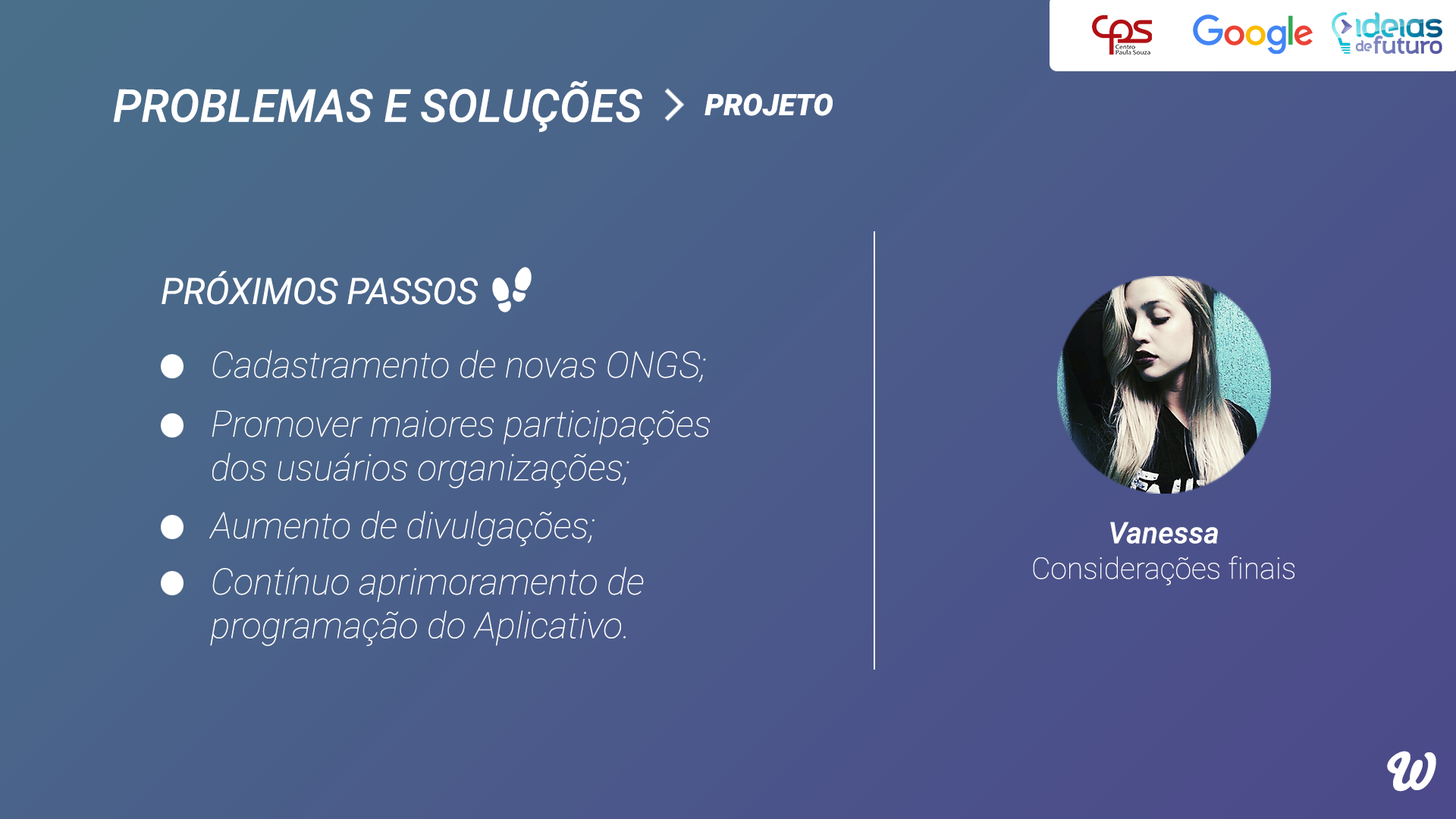
<style>
.page{position:relative;width:1456px;height:819px}
.page>*{position:absolute;margin:0}
.t1{font:45.5px "Roboto-MediumItalic";color:#ffffff}
.t2{font:29.7px "Roboto-BlackItalic";color:#ffffff}
.t3{font:36.4px "Roboto-Italic";color:#ffffff}
.t4{font:36.4px "Roboto-ThinItalic";color:#ffffff}
.t5{font:29.6px "Roboto-Thin";color:#ffffff}
.t6{font:29.6px "Roboto-MediumItalic";color:#ffffff}
.t7{font:50.8px "Bello-Pro";color:#ffffff}
</style>
<div class="page">
<p class="t1" style="left:113px;top:80px;width:529px;height:53px">PROBLEMAS E SOLUÇÕES</p>
<p class="t2" style="left:704px;top:93px;width:129px;height:23px">PROJETO</p>
<p class="t3" style="left:162px;top:271px;width:316px;height:34px">PRÓXIMOS PASSOS</p>
<p class="t4" style="left:212px;top:350px;width:494px;height:32px">Cadastramento de novas ONGS;</p>
<p class="t4" style="left:212px;top:410px;width:498px;height:78px">Promover maiores participações dos usuários organizações;</p>
<p class="t4" style="left:209px;top:510px;width:386px;height:37px">Aumento de divulgações;</p>
<p class="t5" style="left:1033px;top:522px;width:261px;height:63px;text-align:center"><span class="t6">Vanessa<br></span>Considerações finais</p>
<p class="t4" style="left:210px;top:566px;width:434px;height:80px">Contínuo aprimoramento de programação do Aplicativo.</p>
<p class="t7" style="left:1387px;top:751px;width:49px;height:41px">W</p>
</div>
